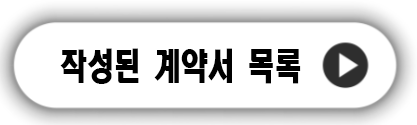
<style>
.page{position:relative;width:417px;height:125px;background:#ffffff}
.page>*{position:absolute;margin:0}
.t1{font:36px "HeadlineR-HM";color:#000000;scale:0.75 1}
</style>
<div class="page">
<p class="t1" style="left:60px;top:48px;width:241px;height:36px">작성된 계약서 목록</p>
<p class="t1" style="left:60px;top:48px;width:241px;height:36px">작성된 계약서 목록</p>
</div>
